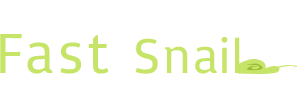
<style>
.page{position:relative;width:297px;height:108px;background:#ffffff}
.page>*{position:absolute;margin:0}
.t1{font:50.8px "Basic";color:#c5e468}
.t2{font:58.8px "Basic";color:#c5e468}
</style>
<div class="page">
<p class="t1" style="left:0px;top:34px;width:240px;height:40px"><span class="t2">Fast </span>Snail</p>
</div>
